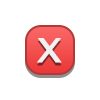
<style>
.page{position:relative;width:100px;height:100px;background:#ffffff}
.page>*{position:absolute;margin:0}
.t1{font:39px "LucidaConsole";color:#f1f1f1;font-weight:bold}
</style>
<div class="page">
<p class="t1" style="left:37px;top:38px;width:25px;height:25px">X</p>
</div>
